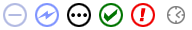
<style>
.page{position:relative;width:192px;height:30px;background:#ffffff}
.page>*{position:absolute;margin:0}
.t1{font:24px "TimesNewRomanPS-BoldMT";color:#000000}
.t2{font:18.2px "Arial-Black";color:#ef0000}
</style>
<div class="page">
<p class="t1" style="left:71px;top:13px;width:16px;height:4px">...</p>
<p class="t2" style="left:139px;top:8px;width:7px;height:14px">!</p>
</div>
